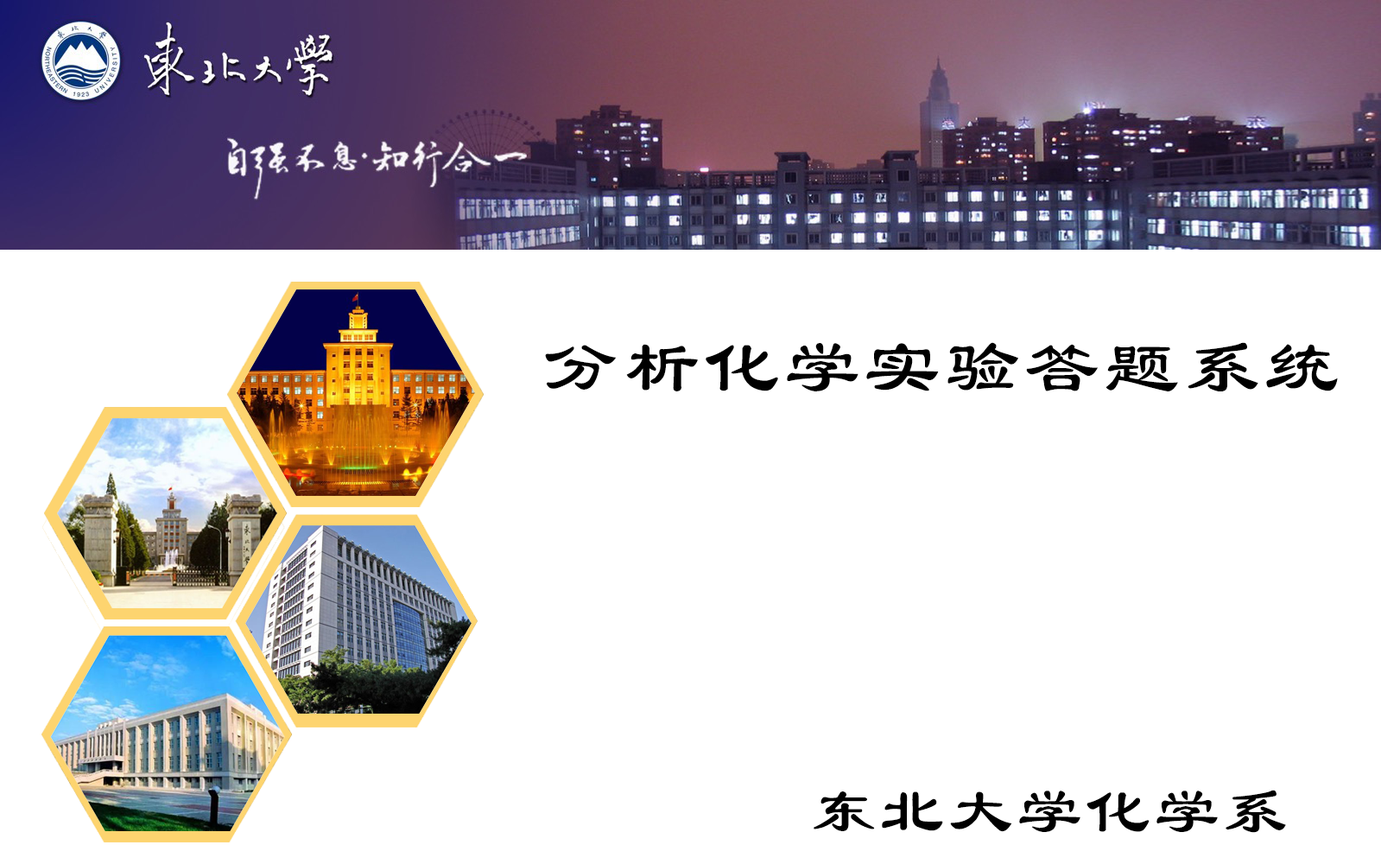
<style>
.page{position:relative;width:1381px;height:864px;background:#ffffff}
.page>*{position:absolute;margin:0}
.t1{font:75.6px "LiSu";letter-spacing:0.06em;color:#000000}
.t2{font:64.8px "LiSu";letter-spacing:0.06em;color:#000000}
</style>
<div class="page">
<p class="t1" style="left:545px;top:342px;width:793px;height:49px">分析化学实验答题系统</p>
<p class="t2" style="left:813px;top:789px;width:473px;height:43px">东北大学化学系</p>
</div>
